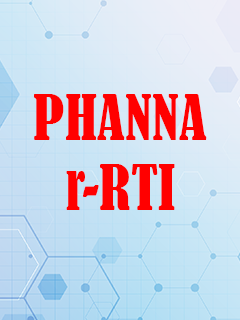
<style>
.page{position:relative;width:240px;height:320px}
.page>*{position:absolute;margin:0}
.t1{font:58.3px "BernardMT-Condensed";color:#ff0000}
</style>
<div class="page">
<p class="t1" style="left:34px;top:94px;width:173px;height:116px;text-align:center">PHANNA<br>r-RTI</p>
</div>
